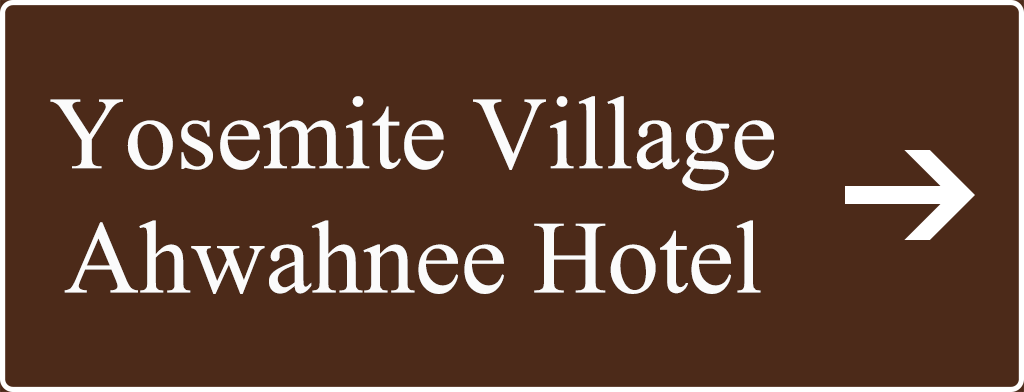
<style>
.page{position:relative;width:1024px;height:392px;background:#4c2a19}
.page>*{position:absolute;margin:0}
.t1{font:103.5px "IskoolaPota";color:#fbfbfb}
</style>
<div class="page">
<p class="t1" style="left:50px;top:96px;width:724px;height:198px;text-align:center">Yosemite Village<br>Ahwahnee Hotel</p>
</div>
